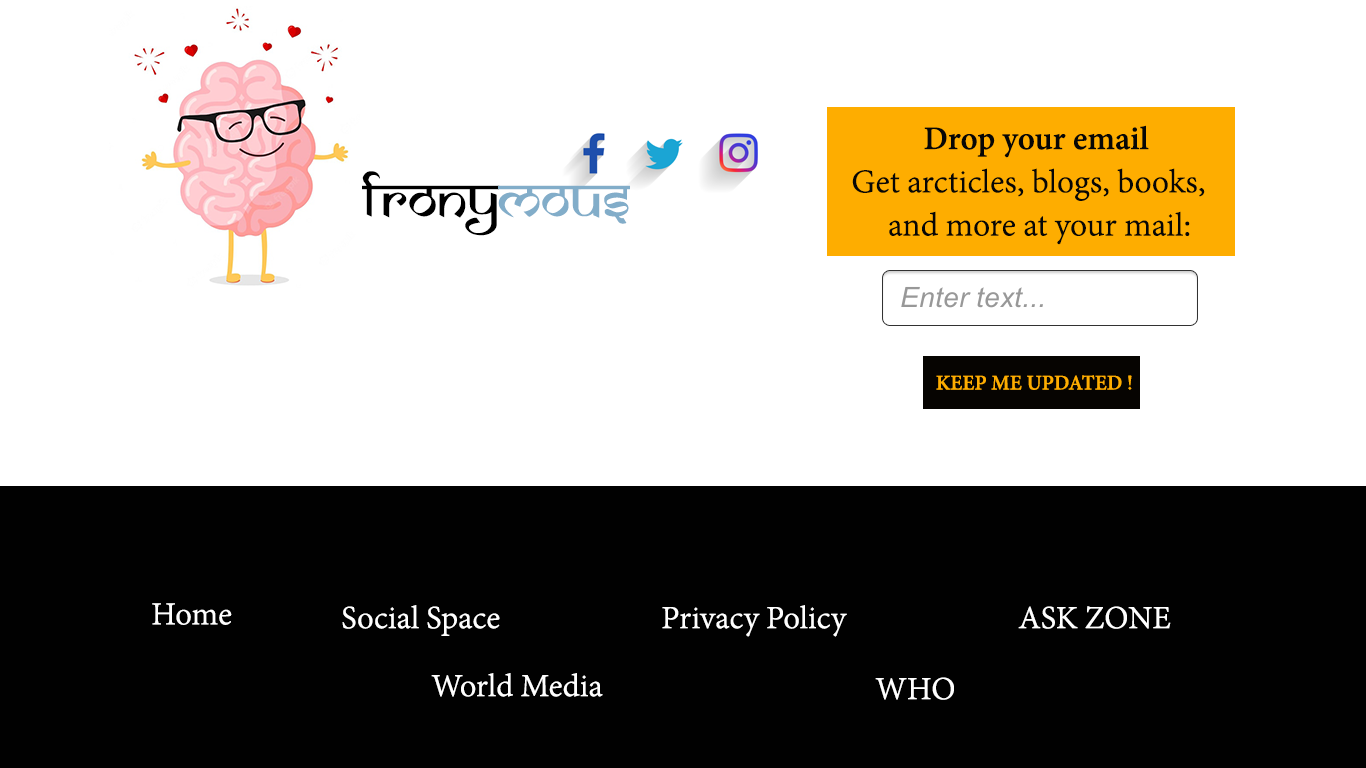
<style>
.page{position:relative;width:1366px;height:768px;background:#ffffff}
.page>*{position:absolute;margin:0}
.t1{font:36px "AdobeDevanagari-Regular";color:#070706}
.t2{font:36px "AdobeDevanagari-Bold";color:#070706}
.t3{font:57.4px "SamarkanNormal";color:#000000}
.t4{font:57.4px "SamarkanNormal";color:#82adc9}
.t5{font:22.8px "AdobeDevanagari-Bold";color:#fead00}
.t6{font:35px "AdobeDevanagari-Regular";color:#ffffff}
</style>
<div class="page">
<p class="t1" style="left:852px;top:125px;width:353px;height:120px"><span class="t2">  Drop your email<br></span>Get arcticles, blogs, books,<br>     and more at your mail:</p>
<p class="t3" style="left:362px;top:171px;width:268px;height:65px">frony<span class="t4">mous</span></p>
<p class="t5" style="left:936px;top:375px;width:196px;height:15px">KEEP ME UPDATED !</p>
<p class="t6" style="left:152px;top:603px;width:80px;height:22px">Home</p>
<p class="t6" style="left:342px;top:605px;width:158px;height:31px">Social Space</p>
<p class="t6" style="left:662px;top:605px;width:185px;height:32px">Privacy Policy</p>
<p class="t6" style="left:1018px;top:606px;width:153px;height:23px">ASK ZONE</p>
<p class="t6" style="left:431px;top:673px;width:172px;height:24px">World Media</p>
<p class="t6" style="left:875px;top:677px;width:79px;height:23px">WHO</p>
</div>
